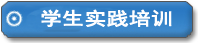
<style>
.page{position:relative;width:198px;height:43px}
.page>*{position:absolute;margin:0}
.t1{font:18px "SimHei";color:#fffefe;font-weight:bold;scale:1.2 1}
</style>
<div class="page">
<p class="t1" style="left:41px;top:9px;width:131px;height:18px">学生实践培训</p>
</div>
